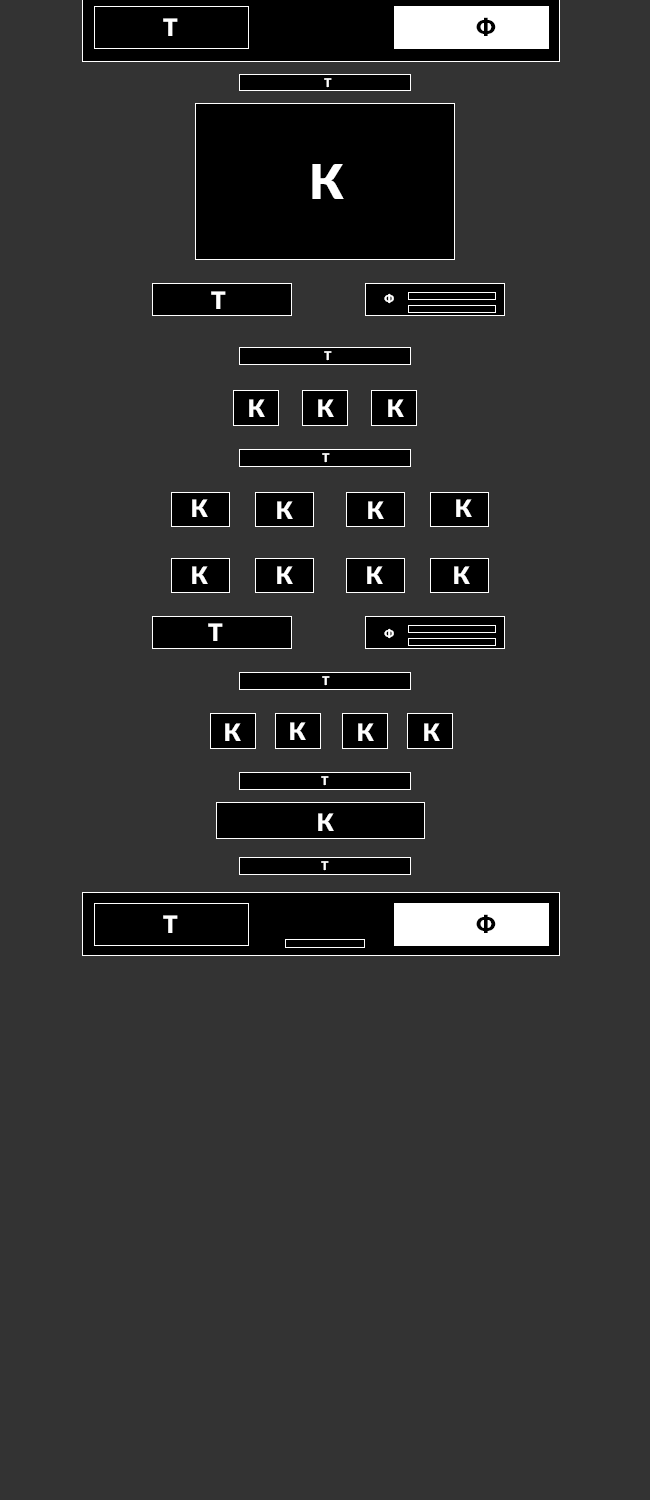
<style>
.page{position:relative;width:650px;height:1500px;background:#333333}
.page>*{position:absolute;margin:0}
.t1{font:24px "Lato-Black";color:#000000;font-variant:small-caps}
.t2{font:24px "Lato-Black";color:#ffffff;font-variant:small-caps}
.t3{font:12px "Lato-Black";color:#ffffff;font-variant:small-caps}
.t4{font:48px "Lato-Black";color:#ffffff;font-variant:small-caps}
</style>
<div class="page">
<p class="t1" style="left:476px;top:17px;width:20px;height:19px">Ф</p>
<p class="t2" style="left:163px;top:18px;width:15px;height:18px">Т</p>
<p class="t3" style="left:324px;top:78px;width:8px;height:10px">Т</p>
<p class="t4" style="left:312px;top:164px;width:32px;height:35px">К</p>
<p class="t2" style="left:211px;top:291px;width:15px;height:18px">Т</p>
<p class="t3" style="left:384px;top:293px;width:10px;height:11px">Ф</p>
<p class="t3" style="left:324px;top:351px;width:8px;height:10px">Т</p>
<p class="t2" style="left:249px;top:399px;width:16px;height:18px">К</p>
<p class="t2" style="left:318px;top:399px;width:16px;height:18px">К</p>
<p class="t2" style="left:388px;top:399px;width:16px;height:18px">К</p>
<p class="t3" style="left:322px;top:453px;width:8px;height:10px">Т</p>
<p class="t2" style="left:192px;top:499px;width:16px;height:18px">К</p>
<p class="t2" style="left:277px;top:501px;width:16px;height:18px">К</p>
<p class="t2" style="left:368px;top:501px;width:16px;height:18px">К</p>
<p class="t2" style="left:456px;top:499px;width:16px;height:18px">К</p>
<p class="t2" style="left:192px;top:566px;width:16px;height:18px">К</p>
<p class="t2" style="left:277px;top:566px;width:16px;height:18px">К</p>
<p class="t2" style="left:367px;top:566px;width:16px;height:18px">К</p>
<p class="t2" style="left:454px;top:566px;width:16px;height:18px">К</p>
<p class="t2" style="left:208px;top:623px;width:15px;height:18px">Т</p>
<p class="t3" style="left:384px;top:628px;width:10px;height:11px">Ф</p>
<p class="t3" style="left:322px;top:676px;width:8px;height:10px">Т</p>
<p class="t2" style="left:225px;top:723px;width:16px;height:18px">К</p>
<p class="t2" style="left:290px;top:722px;width:16px;height:18px">К</p>
<p class="t2" style="left:358px;top:723px;width:16px;height:18px">К</p>
<p class="t2" style="left:424px;top:723px;width:16px;height:18px">К</p>
<p class="t3" style="left:321px;top:776px;width:8px;height:10px">Т</p>
<p class="t2" style="left:318px;top:813px;width:16px;height:18px">К</p>
<p class="t3" style="left:321px;top:861px;width:8px;height:10px">Т</p>
<p class="t2" style="left:163px;top:915px;width:15px;height:18px">Т</p>
<p class="t1" style="left:476px;top:914px;width:20px;height:19px">Ф</p>
</div>
